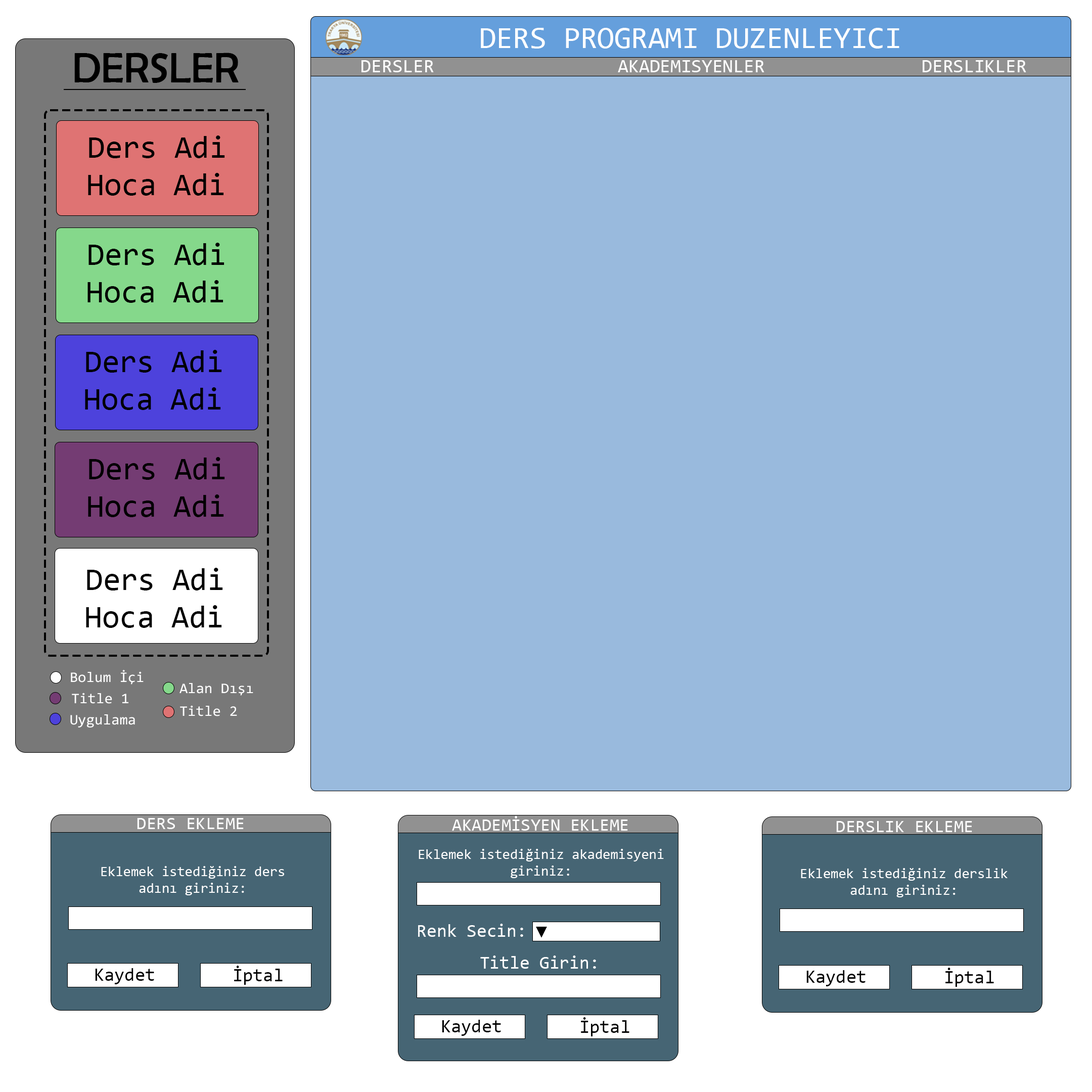
<style>
.page{position:relative;width:1092px;height:1092px;background:#99badd}
.page>*{position:absolute;margin:0}
.t1{font:30.7px "Consolas";color:#ffffff}
.t2{font:42.5px "BerlinSansFB-Reg";color:#000000}
.t3{font:19px "Consolas";color:#ffffff}
.t4{font:31.6px "Consolas";color:#000000}
.t5{font:14.7px "Consolas";color:#ffffff}
.t6{font:17.9px "Consolas";color:#ffffff}
.t7{font:14px "Consolas";color:#ffffff}
.t8{font:18.1px "Consolas";color:#ffffff}
.t9{font:20.3px "Consolas";color:#000000}
.t10{font:18.6px "Consolas";color:#000000}
</style>
<div class="page">
<p class="t1" style="left:481px;top:28px;width:418px;height:21px">DERS PROGRAMI DUZENLEYICI</p>
<p class="t2" style="left:74px;top:53px;width:165px;height:30px">DERSLER</p>
<p class="t3" style="left:361px;top:60px;width:73px;height:12px">DERSLER</p>
<p class="t3" style="left:618px;top:60px;width:146px;height:12px">AKADEMISYENLER</p>
<p class="t3" style="left:923px;top:60px;width:103px;height:12px">DERSLIKLER</p>
<p class="t4" style="left:89px;top:135px;width:136px;height:23px">Ders Adi</p>
<p class="t4" style="left:88px;top:173px;width:136px;height:23px">Hoca Adi</p>
<p class="t4" style="left:88px;top:243px;width:136px;height:22px">Ders Adi</p>
<p class="t4" style="left:87px;top:280px;width:136px;height:23px">Hoca Adi</p>
<p class="t4" style="left:86px;top:350px;width:136px;height:23px">Ders Adi</p>
<p class="t4" style="left:85px;top:387px;width:136px;height:23px">Hoca Adi</p>
<p class="t4" style="left:89px;top:457px;width:136px;height:23px">Ders Adi</p>
<p class="t4" style="left:88px;top:494px;width:136px;height:23px">Hoca Adi</p>
<p class="t4" style="left:87px;top:568px;width:136px;height:22px">Ders Adi</p>
<p class="t4" style="left:86px;top:605px;width:136px;height:23px">Hoca Adi</p>
<p class="t5" style="left:71px;top:670px;width:73px;height:15px">Bolum İçi</p>
<p class="t5" style="left:179px;top:683px;width:74px;height:13px">Alan Dışı</p>
<p class="t5" style="left:72px;top:693px;width:56px;height:11px">Title 1</p>
<p class="t5" style="left:180px;top:705px;width:57px;height:11px">Title 2</p>
<p class="t5" style="left:70px;top:714px;width:65px;height:13px">Uygulama</p>
<p class="t6" style="left:137px;top:818px;width:107px;height:11px">DERS EKLEME</p>
<p class="t6" style="left:452px;top:816px;width:176px;height:15px">AKADEMİSYEN EKLEME</p>
<p class="t6" style="left:836px;top:821px;width:136px;height:11px">DERSLIK EKLEME</p>
<p class="t7" style="left:419px;top:849px;width:245px;height:29px;text-align:center">Eklemek istediğiniz akademisyeni<br>giriniz:</p>
<p class="t7" style="left:101px;top:866px;width:183px;height:29px;text-align:center">Eklemek istediğiniz ders<br>adını giriniz:</p>
<p class="t7" style="left:801px;top:868px;width:207px;height:29px;text-align:center">Eklemek istediğiniz derslik<br>adını giriniz:</p>
<p class="t8" style="left:418px;top:924px;width:105px;height:13px">Renk Secin:</p>
<p class="t9" style="left:536px;top:927px;width:11px;height:11px">▼</p>
<p class="t10" style="left:234px;top:966px;width:49px;height:19px">İptal</p>
<p class="t8" style="left:480px;top:955px;width:116px;height:14px">Title Girin:</p>
<p class="t10" style="left:95px;top:968px;width:59px;height:16px">Kaydet</p>
<p class="t10" style="left:806px;top:970px;width:59px;height:16px">Kaydet</p>
<p class="t10" style="left:945px;top:968px;width:49px;height:19px">İptal</p>
<p class="t10" style="left:442px;top:1020px;width:59px;height:16px">Kaydet</p>
<p class="t10" style="left:581px;top:1017px;width:48px;height:19px">İptal</p>
</div>
